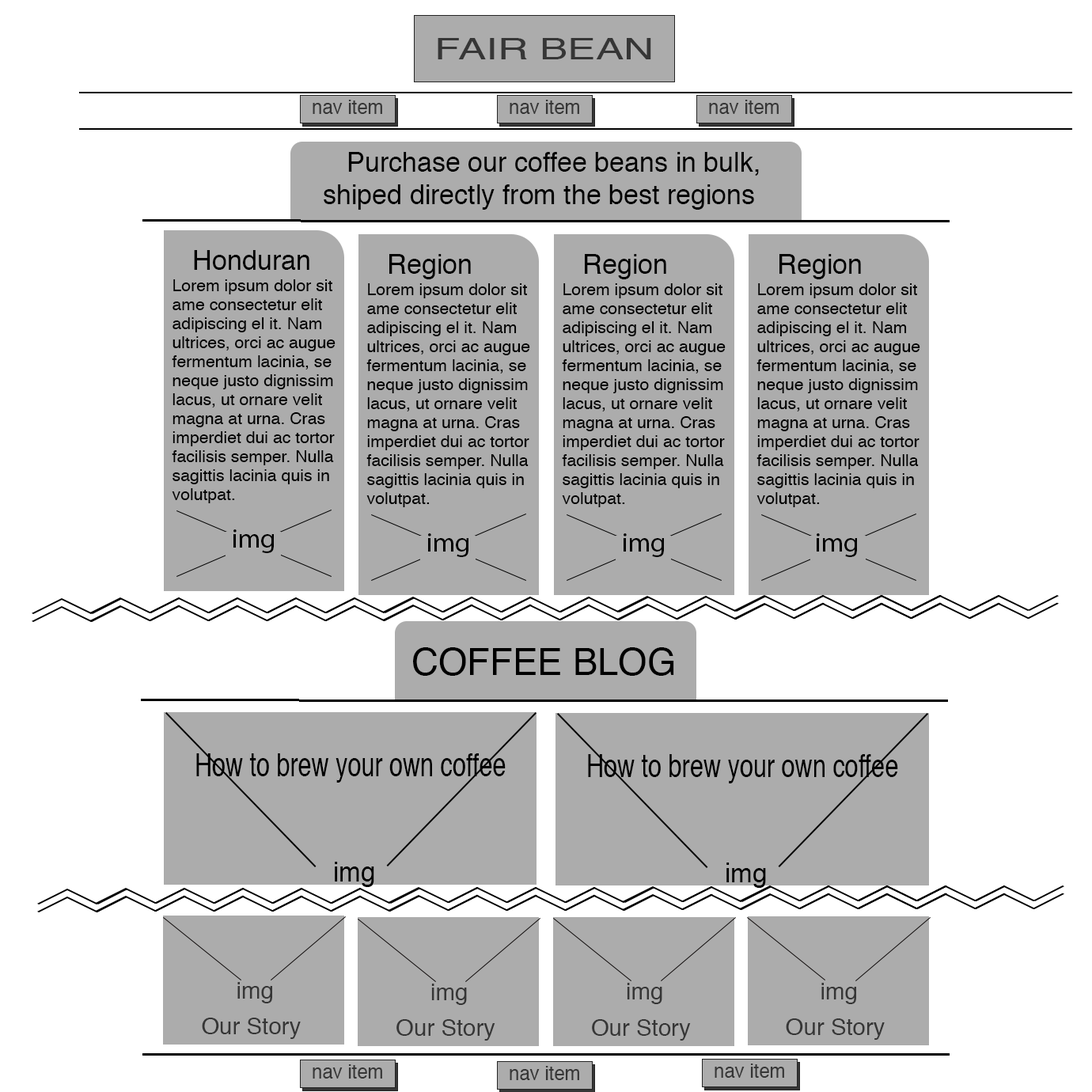
<style>
.page{position:relative;width:1092px;height:1092px;background:#ffffff}
.page>*{position:absolute;margin:0}
.t1{font:30.1px "Helvetica";color:#363636;scale:1.39 1}
.t2{font:19px "Helvetica";color:#363636}
.t3{font:26.9px "Helvetica";color:#000000}
.t4{font:15.8px "Helvetica";color:#000000;scale:1.06 1}
.t5{font:26.9px "MyriadPro-Regular";color:#000000}
.t6{font:37.2px "Helvetica";color:#000000}
.t7{font:32.1px "Helvetica";color:#000000;scale:0.75 1}
.t8{font:32.1px "Helvetica";color:#000000;scale:0.76 1}
.t9{font:26.9px "MyriadPro-Bold";color:#000000}
.t10{font:23.2px "Helvetica";color:#363636}
</style>
<div class="page">
<p class="t1" style="left:438px;top:38px;width:213px;height:21px">FAIR BEAN</p>
<p class="t2" style="left:313px;top:100px;width:69px;height:14px">nav item</p>
<p class="t2" style="left:510px;top:100px;width:69px;height:14px">nav item</p>
<p class="t2" style="left:709px;top:100px;width:70px;height:14px">nav item</p>
<p class="t3" style="left:324px;top:152px;width:435px;height:58px">Purchase our coffee beans in bulk,  shiped directly from the best regions</p>
<p class="t3" style="left:194px;top:250px;width:115px;height:20px">Honduran</p>
<p class="t3" style="left:389px;top:254px;width:82px;height:25px">Region</p>
<p class="t3" style="left:585px;top:254px;width:81px;height:25px">Region</p>
<p class="t3" style="left:779px;top:254px;width:82px;height:25px">Region</p>
<p class="t4" style="left:172px;top:279px;width:164px;height:224px">Lorem ipsum dolor sit <br>ame consectetur elit <br>adipiscing el it. Nam <br>ultrices, orci ac augue <br>fermentum lacinia, se <br>neque justo dignissim <br>lacus, ut ornare velit<br>magna at urna. Cras <br>imperdiet dui ac tortor <br>facilisis semper. Nulla <br>sagittis lacinia quis in  <br>volutpat.</p>
<p class="t4" style="left:366px;top:283px;width:164px;height:224px">Lorem ipsum dolor sit <br>ame consectetur elit <br>adipiscing el it. Nam <br>ultrices, orci ac augue <br>fermentum lacinia, se <br>neque justo dignissim <br>lacus, ut ornare velit<br>magna at urna. Cras <br>imperdiet dui ac tortor <br>facilisis semper. Nulla <br>sagittis lacinia quis in  <br>volutpat.</p>
<p class="t4" style="left:562px;top:283px;width:164px;height:224px">Lorem ipsum dolor sit <br>ame consectetur elit <br>adipiscing el it. Nam <br>ultrices, orci ac augue <br>fermentum lacinia, se <br>neque justo dignissim <br>lacus, ut ornare velit<br>magna at urna. Cras <br>imperdiet dui ac tortor <br>facilisis semper. Nulla <br>sagittis lacinia quis in  <br>volutpat.</p>
<p class="t4" style="left:756px;top:283px;width:164px;height:224px">Lorem ipsum dolor sit <br>ame consectetur elit <br>adipiscing el it. Nam <br>ultrices, orci ac augue <br>fermentum lacinia, se <br>neque justo dignissim <br>lacus, ut ornare velit<br>magna at urna. Cras <br>imperdiet dui ac tortor <br>facilisis semper. Nulla <br>sagittis lacinia quis in  <br>volutpat.</p>
<p class="t5" style="left:233px;top:529px;width:41px;height:24px">img</p>
<p class="t5" style="left:428px;top:533px;width:40px;height:24px">img</p>
<p class="t5" style="left:624px;top:533px;width:40px;height:24px">img</p>
<p class="t5" style="left:817px;top:533px;width:40px;height:24px">img</p>
<p class="t6" style="left:413px;top:647px;width:261px;height:29px">COFFEE BLOG</p>
<p class="t7" style="left:196px;top:753px;width:310px;height:30px">How to brew your own coffee</p>
<p class="t8" style="left:588px;top:754px;width:310px;height:29px">How to brew your own coffee</p>
<p class="t3" style="left:335px;top:862px;width:39px;height:25px"><span class="t9"> </span>img</p>
<p class="t3" style="left:726px;top:863px;width:40px;height:25px"><span class="t9"> </span>img</p>
<p class="t10" style="left:237px;top:982px;width:35px;height:21px">img</p>
<p class="t10" style="left:431px;top:984px;width:36px;height:21px">img</p>
<p class="t10" style="left:627px;top:983px;width:35px;height:21px">img</p>
<p class="t10" style="left:821px;top:983px;width:35px;height:21px">img</p>
<p class="t10" style="left:202px;top:1018px;width:99px;height:21px">Our Story</p>
<p class="t10" style="left:396px;top:1019px;width:99px;height:22px">Our Story</p>
<p class="t10" style="left:592px;top:1019px;width:99px;height:22px">Our Story</p>
<p class="t10" style="left:786px;top:1018px;width:99px;height:22px">Our Story</p>
<p class="t2" style="left:313px;top:1064px;width:69px;height:15px">nav item</p>
<p class="t2" style="left:510px;top:1066px;width:69px;height:14px">nav item</p>
<p class="t2" style="left:715px;top:1063px;width:69px;height:15px">nav item</p>
</div>
